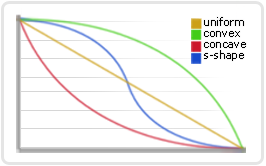
<style>
.page{position:relative;width:266px;height:166px;background:#ffffff}
.page>*{position:absolute;margin:0}
.t1{font:10.5px/11.1px "Verdana";color:#000000}
</style>
<div class="page">
<p class="t1" style="left:204px;top:17px;width:42px;height:44px">uniform<br>convex<br>concave<br>s-shape</p>
</div>
